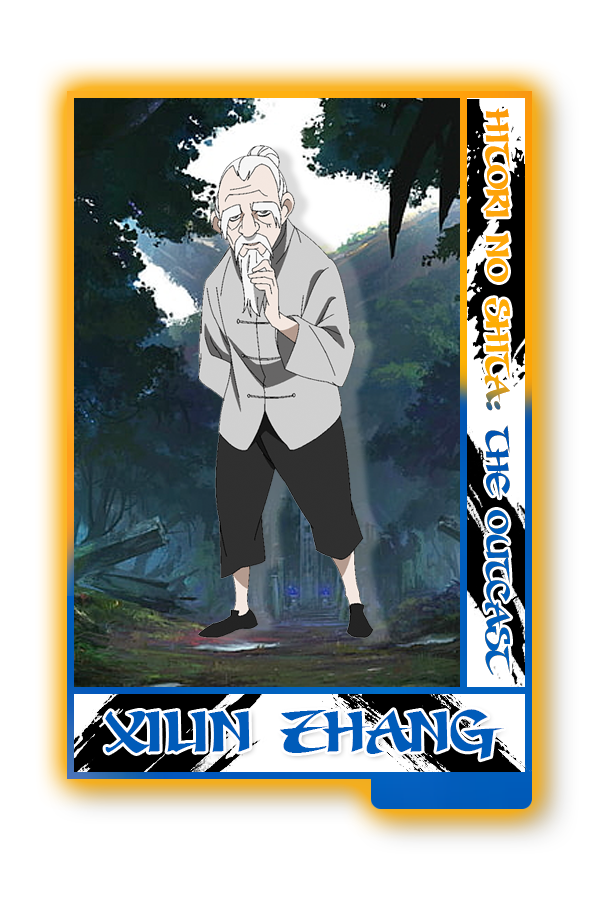
<style>
.page{position:relative;width:600px;height:900px;background:#ffffff}
.page>*{position:absolute;margin:0}
.t1{font:36.7px "SevenSwordsmenBB"}
.t2{font:64.5px "SevenSwordsmenBB";color:#005bb9}
</style>
<div class="page">
<p class="t1" style="left:483px;top:108px;width:28px;height:567px;rotate:90deg">HITORI NO SHITA: THE OUTCAST</p>
<p class="t2" style="left:105px;top:709px;width:399px;height:51px">Xilin Zhang</p>
</div>
